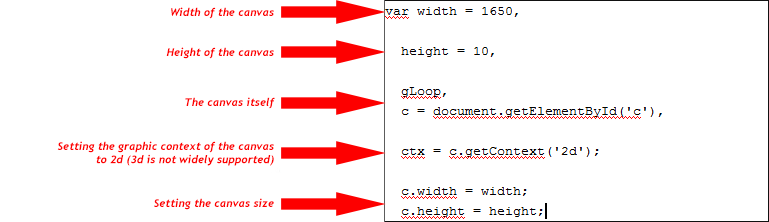
<style>
.page{position:relative;width:769px;height:222px;background:#ffffff}
.page>*{position:absolute;margin:0}
.t1{font:11px "Trebuchet-BoldItalic";color:#fd0000}
</style>
<div class="page">
<p class="t1" style="left:171px;top:7px;width:103px;height:12px">Width of the canvas</p>
<p class="t1" style="left:166px;top:47px;width:108px;height:12px">Height of the canvas</p>
<p class="t1" style="left:185px;top:97px;width:90px;height:12px">The canvas itself</p>
<p class="t1" style="left:57px;top:141px;width:217px;height:25px;text-align:right">Setting the graphic context of the canvas<br>to 2d (3d is not widely supported)</p>
<p class="t1" style="left:154px;top:198px;width:120px;height:12px">Setting the canvas size</p>
</div>
